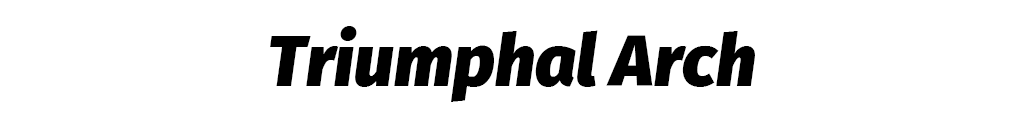
<style>
.page{position:relative;width:1024px;height:128px;background:#ffffff}
.page>*{position:absolute;margin:0}
.t1{font:71.8px "FiraSans-BlackItalic";color:#000000}
</style>
<div class="page">
<p class="t1" style="left:270px;top:26px;width:485px;height:76px">Triumphal Arch</p>
</div>
